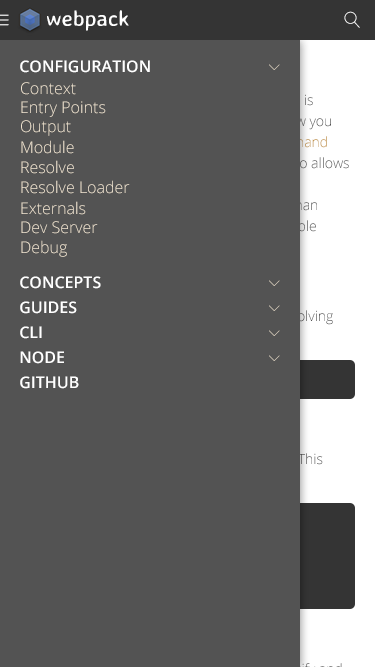
<style>
.page{position:relative;width:375px;height:667px;background:#535353}
.page>*{position:absolute;margin:0}
.t1{font:22px "AveriaSansLibre-Regular";color:#ffffff}
.t2{font:16px "OpenSans-Semibold";color:#ffffff}
.t3{font:16px "OpenSans-Light";color:#efe3d0}
</style>
<div class="page">
<p class="t1" style="left:47px;top:10px;width:82px;height:21px">webpack</p>
<p class="t2" style="left:20px;top:60px;width:130px;height:13px">CONFIGURATION</p>
<p class="t3" style="left:21px;top:82px;width:55px;height:13px">Context</p>
<p class="t3" style="left:21px;top:101px;width:85px;height:16px">Entry Points</p>
<p class="t3" style="left:21px;top:120px;width:50px;height:16px">Output</p>
<p class="t3" style="left:21px;top:140px;width:53px;height:14px">Module</p>
<p class="t3" style="left:21px;top:160px;width:53px;height:14px">Resolve</p>
<p class="t3" style="left:21px;top:180px;width:109px;height:14px">Resolve Loader</p>
<p class="t3" style="left:21px;top:201px;width:65px;height:14px">Externals</p>
<p class="t3" style="left:21px;top:221px;width:77px;height:13px">Dev Server</p>
<p class="t3" style="left:21px;top:240px;width:46px;height:17px">Debug</p>
<p class="t2" style="left:20px;top:276px;width:81px;height:13px">CONCEPTS</p>
<p class="t2" style="left:20px;top:301px;width:57px;height:13px">GUIDES</p>
<p class="t2" style="left:20px;top:326px;width:22px;height:13px">CLI</p>
<p class="t2" style="left:20px;top:351px;width:44px;height:13px">NODE</p>
<p class="t2" style="left:20px;top:376px;width:59px;height:13px">GITHUB</p>
</div>
